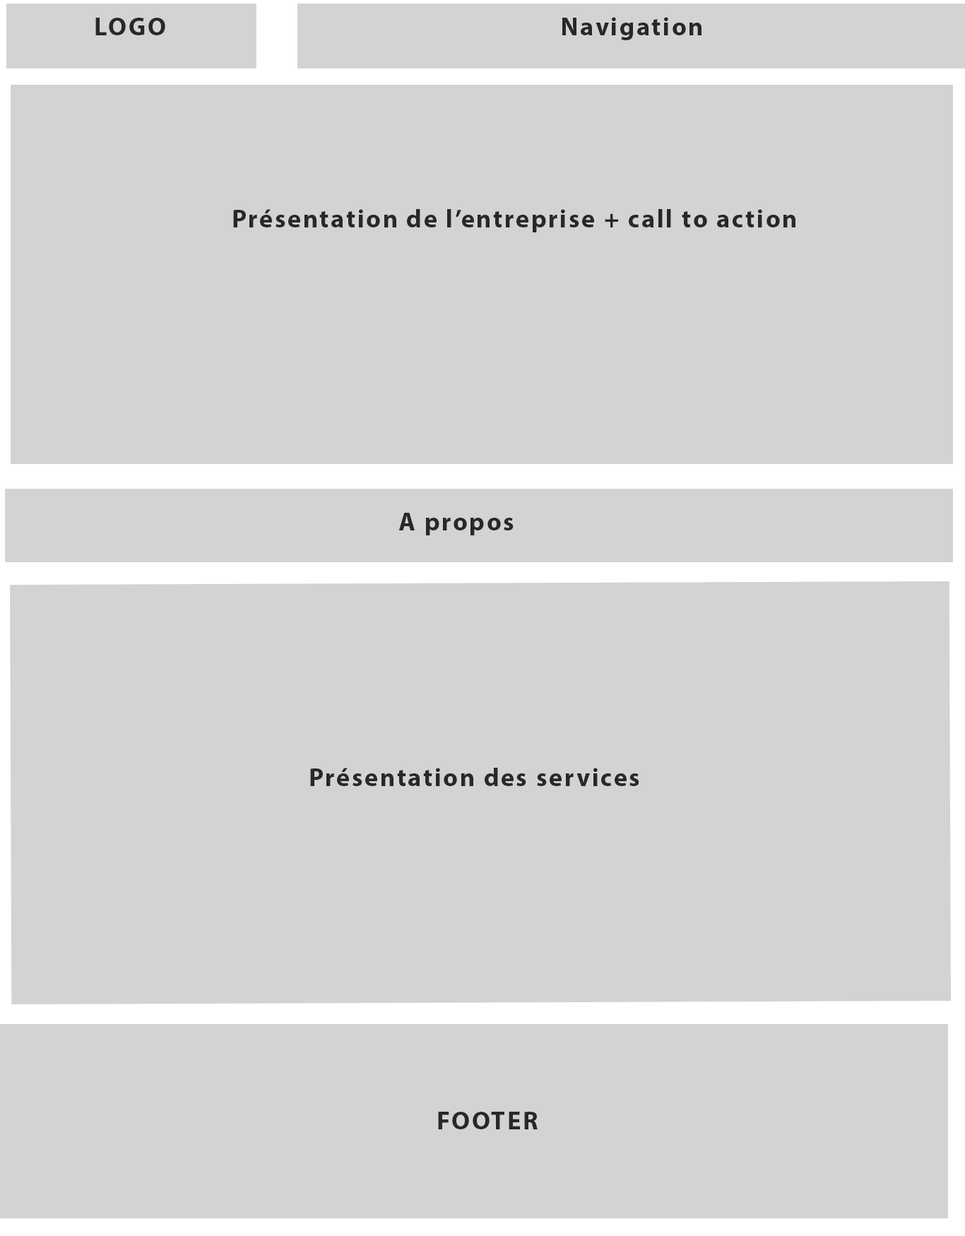
<style>
.page{position:relative;width:965px;height:1236px;background:#d3d3d3}
.page>*{position:absolute;margin:0}
.t1{font:25.4px "MyriadPro-Bold";letter-spacing:0.075em;color:#282828}
</style>
<div class="page">
<p class="t1" style="left:95px;top:18px;width:70px;height:17px">LOGO</p>
<p class="t1" style="left:562px;top:17px;width:139px;height:23px">Navigation</p>
<p class="t1" style="left:233px;top:209px;width:562px;height:23px">Présentation de l’entreprise + call to action</p>
<p class="t1" style="left:398px;top:513px;width:115px;height:22px">A propos</p>
<p class="t1" style="left:310px;top:768px;width:329px;height:18px">Présentation des services</p>
<p class="t1" style="left:438px;top:1112px;width:99px;height:17px">FOOTER</p>
</div>
